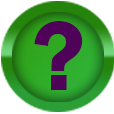
<style>
.page{position:relative;width:114px;height:114px;background:#ffffff}
.page>*{position:absolute;margin:0}
.t1{font:102px "FranklinGothic-Demi";letter-spacing:0.05em;color:#4f0358}
</style>
<div class="page">
<p class="t1" style="left:34px;top:21px;width:49px;height:69px">?</p>
</div>
